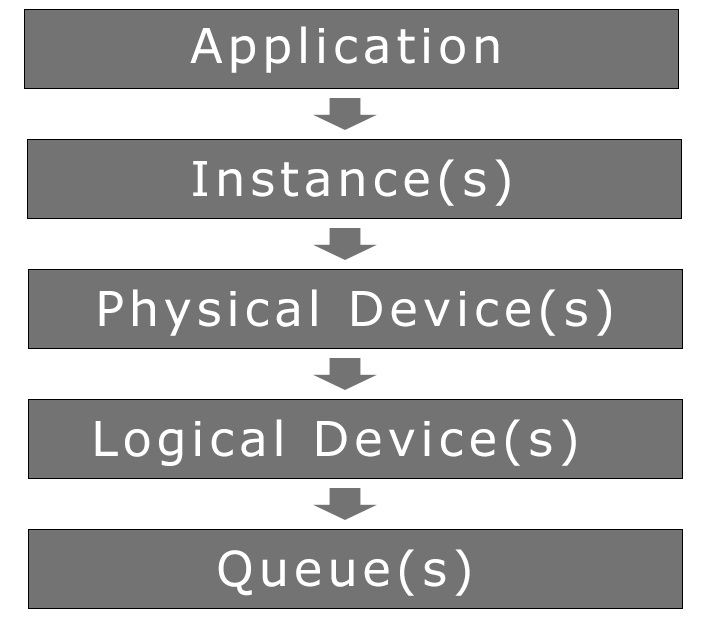
<style>
.page{position:relative;width:710px;height:622px;background:#737373}
.page>*{position:absolute;margin:0}
.t1{font:48px "Verdana";letter-spacing:0.1em;color:#ffffff}
</style>
<div class="page">
<p class="t1" style="left:190px;top:26px;width:309px;height:47px">Application</p>
<p class="t1" style="left:193px;top:159px;width:317px;height:47px">Instance(s)</p>
<p class="t1" style="left:99px;top:289px;width:512px;height:47px">Physical Device(s)</p>
<p class="t1" style="left:95px;top:419px;width:481px;height:47px">Logical Device(s)</p>
<p class="t1" style="left:218px;top:549px;width:252px;height:47px">Queue(s)</p>
</div>
